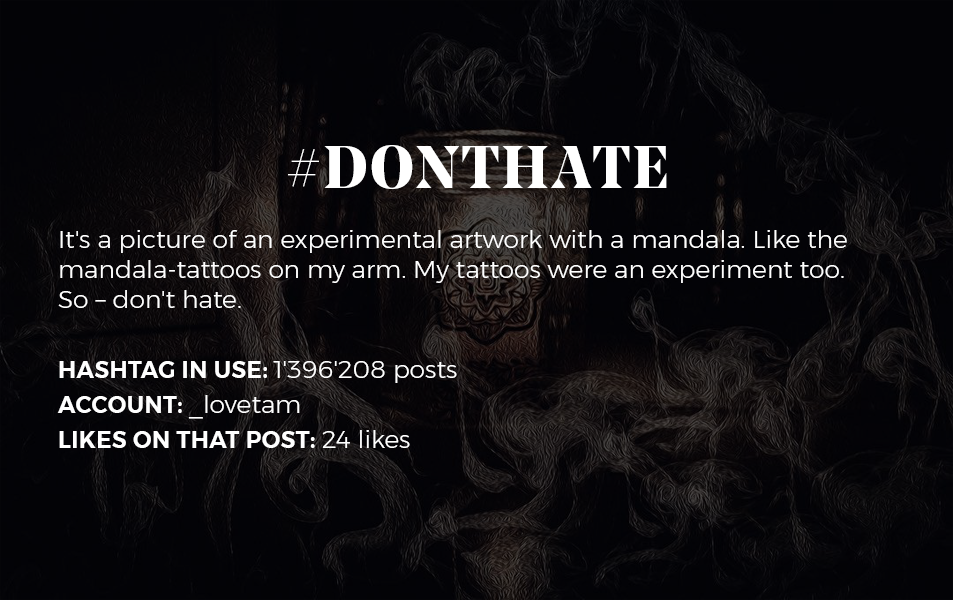
<style>
.page{position:relative;width:953px;height:600px}
.page>*{position:absolute;margin:0}
.t1{font:25px "Montserrat-Light";color:#ffffff}
.t2{font:60px "NoeDisplay-Bold";letter-spacing:0.05em;color:#ffffff}
.t3{font:23px/35px "Montserrat-SemiBold";letter-spacing:0.02em;color:#ffffff;text-transform:uppercase}
.t4{font:25px/35px "Montserrat-Light";color:#ffffff}
</style>
<div class="page">
<p class="t1" style="left:57px;top:145px;width:790px;height:303px;text-align:center"><span class="t2">#DONTHATE<br></span><br>It's a picture of an experimental artwork with a mandala. Like the mandala-tattoos on my arm. My tattoos were an experiment too. <br>So – don't hate.<br><span class="t3"><br>Hashtag in use: </span><span class="t4">1'396'208 posts<br></span><span class="t3">ACCount: </span><span class="t4">_lovetam<br></span><span class="t3">likes on that post: </span><span class="t4">24 likes</span></p>
</div>
